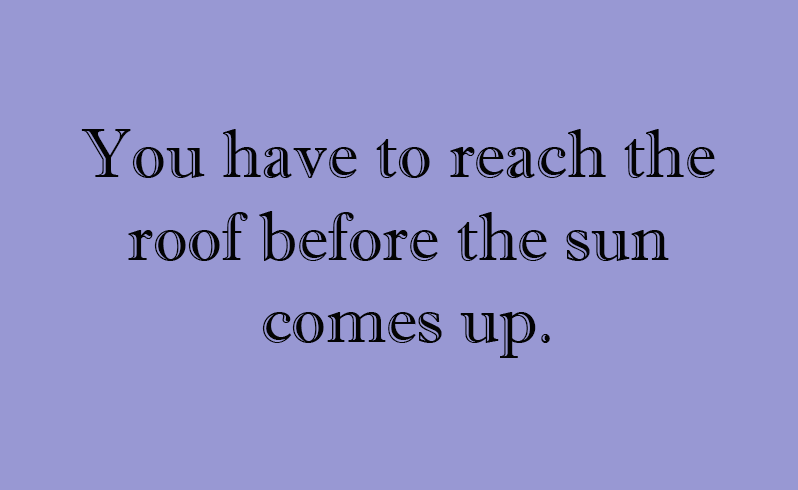
<style>
.page{position:relative;width:798px;height:490px;background:#9898d3}
.page>*{position:absolute;margin:0}
.t1{font:68.7px "ImprintMT-Shadow";color:#030303}
</style>
<div class="page">
<p class="t1" style="left:81px;top:129px;width:634px;height:229px;text-align:center">You have to reach the <br>roof before the sun <br>comes up.</p>
</div>
